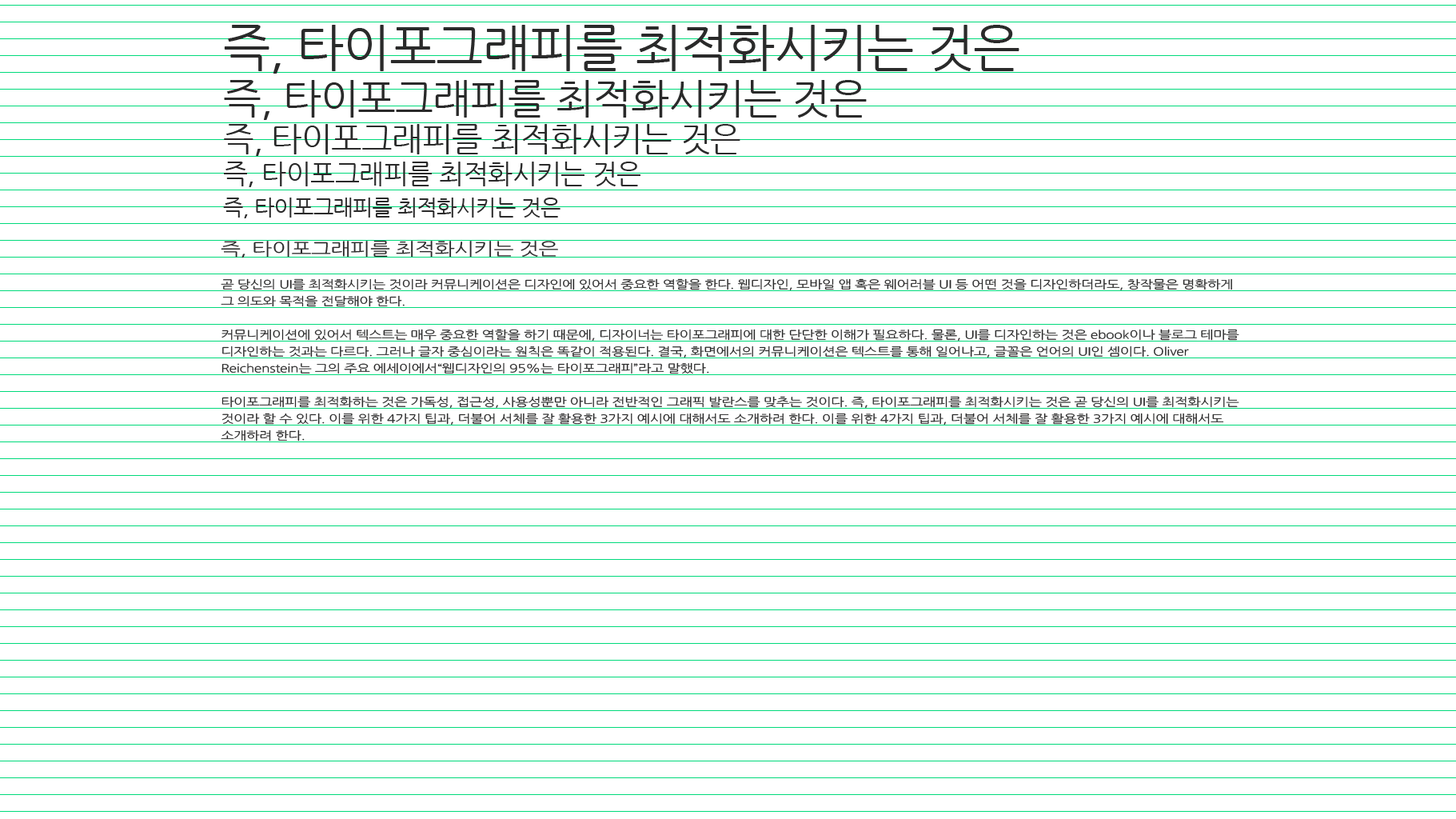
<style>
.page{position:relative;width:1456px;height:819px;background:#ffffff}
.page>*{position:absolute;margin:0}
.t1{font:50.5px "NanumGothic";letter-spacing:-0.02em;color:#2a2a2a}
.t2{font:40.8px "NanumGothic";letter-spacing:-0.02em;color:#2a2a2a}
.t3{font:32.8px "NanumGothic";letter-spacing:-0.02em;color:#2a2a2a}
.t4{font:26.5px "NanumGothic";letter-spacing:-0.02em;color:#2a2a2a}
.t5{font:21.4px "NanumGothic";letter-spacing:-0.02em;color:#2a2a2a}
.t6{font:11.2px "NanumGothic";letter-spacing:-0.02em;color:#2a2a2a;scale:1.24 1}
.t7{font:17.2px "NanumGothic";letter-spacing:-0.02em;color:#2a2a2a;scale:1.24 1}
</style>
<div class="page">
<p class="t1" style="left:224px;top:25px;width:796px;height:49px">즉, 타이포그래피를 최적화시키는 것은</p>
<p class="t2" style="left:224px;top:80px;width:643px;height:40px">즉, 타이포그래피를 최적화시키는 것은</p>
<p class="t3" style="left:224px;top:124px;width:516px;height:32px">즉, 타이포그래피를 최적화시키는 것은</p>
<p class="t4" style="left:224px;top:162px;width:417px;height:25px">즉, 타이포그래피를 최적화시키는 것은</p>
<p class="t5" style="left:223px;top:198px;width:338px;height:20px">즉, 타이포그래피를 최적화시키는 것은</p>
<p class="t6" style="left:221px;top:240px;width:1018px;height:201px"><span class="t7">즉, 타이포그래피를 최적화시키는 것은 <br></span>곧 당신의 UI를 최적화시키는 것이라 커뮤니케이션은 디자인에 있어서 중요한 역할을 한다. 웹디자인, 모바일 앱 혹은 웨어러블 UI 등 어떤 것을 디자인하더라도, 창작물은 명확하게 그 의도와 목적을 전달해야 한다. <br>커뮤니케이션에 있어서 텍스트는 매우 중요한 역할을 하기 때문에, 디자이너는 타이포그래피에 대한 단단한 이해가 필요하다. 물론, UI를 디자인하는 것은 ebook이나 블로그 테마를 디자인하는 것과는 다르다. 그러나 글자 중심이라는 원칙은 똑같이 적용된다. 결국, 화면에서의 커뮤니케이션은 텍스트를 통해 일어나고, 글꼴은 언어의 UI인 셈이다. Oliver Reichenstein는 그의 주요 에세이에서“웹디자인의 95%는 타이포그래피”라고 말했다. <br>타이포그래피를 최적화하는 것은 가독성, 접근성, 사용성뿐만 아니라 전반적인 그래픽 발란스를 맞추는 것이다. 즉, 타이포그래피를 최적화시키는 것은 곧 당신의 UI를 최적화시키는 것이라 할 수 있다. 이를 위한 4가지 팁과, 더불어 서체를 잘 활용한 3가지 예시에 대해서도 소개하려 한다. 이를 위한 4가지 팁과, 더불어 서체를 잘 활용한 3가지 예시에 대해서도 소개하려 한다.</p>
</div>
